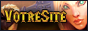
<style>
.page{position:relative;width:88px;height:31px}
.page>*{position:absolute;margin:0}
.t1{font:18px "LifeCraft"}
</style>
<div class="page">
<p class="t1" style="left:4px;top:9px;width:62px;height:14px">VotreSite</p>
</div>
